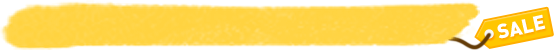
<style>
.page{position:relative;width:556px;height:52px;background:#ffffff}
.page>*{position:absolute;margin:0}
.t1{font:20px "DIN-Black";color:#ffffff;text-transform:uppercase}
</style>
<div class="page">
<p class="t1" style="left:497px;top:14px;width:49px;height:25px;rotate:-13deg">sale</p>
</div>
